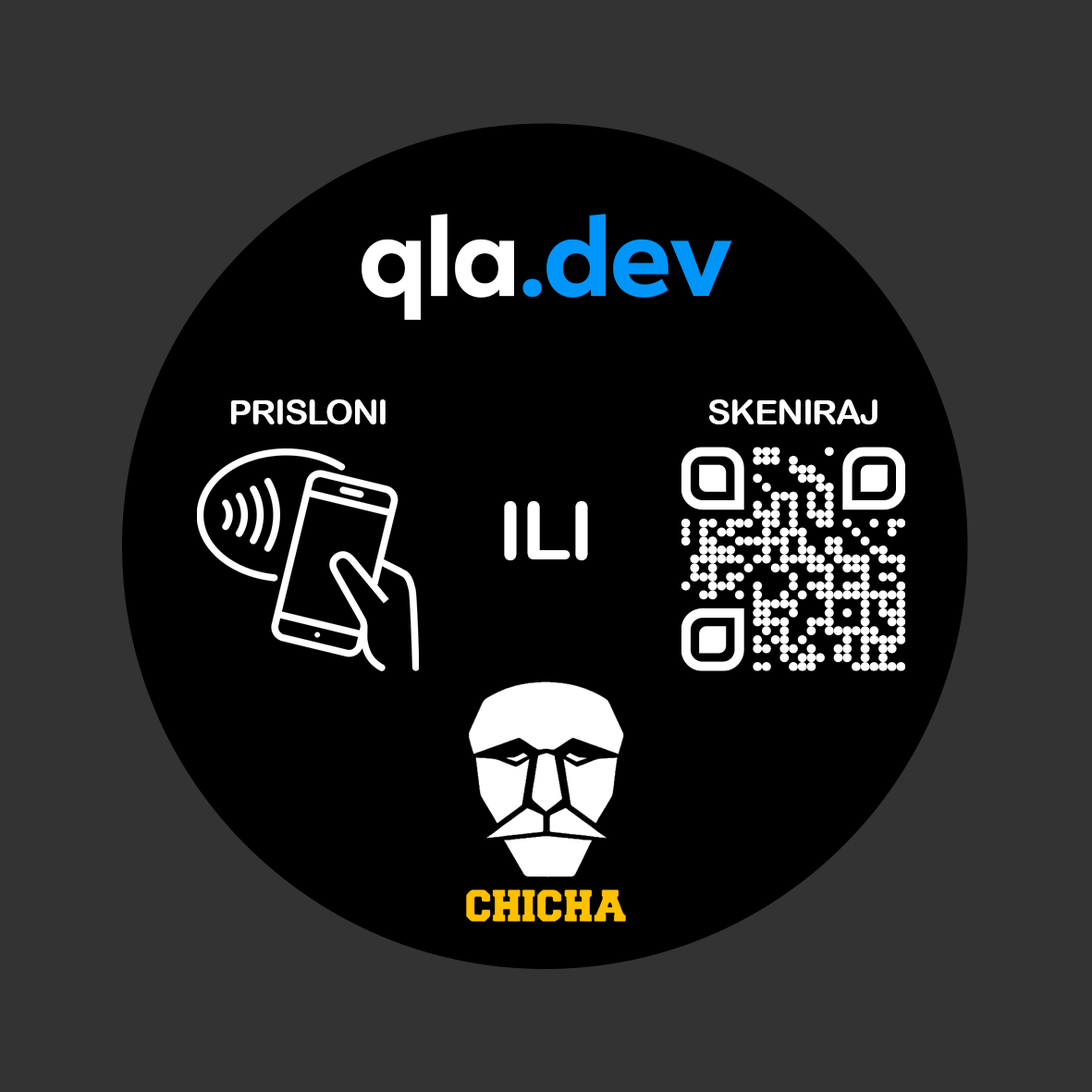
<style>
.page{position:relative;width:1092px;height:1092px;background:#333333}
.page>*{position:absolute;margin:0}
.t1{font:108.6px "FacebookSans-Bold";letter-spacing:-0.025em;color:#0095f8}
.t2{font:108.6px "FacebookSans-Bold";letter-spacing:-0.025em;color:#ffffff}
.t3{font:34.4px "ArialRoundedMTBold";letter-spacing:-0.025em;color:#ffffff}
.t4{font:80.9px "ArialRoundedMTBold";letter-spacing:-0.025em;color:#ffffff}
</style>
<div class="page">
<p class="t1" style="left:362px;top:214px;width:370px;height:106px"><span class="t2">qla</span>.dev</p>
<p class="t3" style="left:231px;top:399px;width:155px;height:25px">PRISLONI</p>
<p class="t3" style="left:709px;top:399px;width:168px;height:25px">SKENIRAJ</p>
<p class="t4" style="left:504px;top:501px;width:84px;height:59px">ILI</p>
</div>
